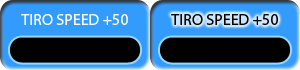
<style>
.page{position:relative;width:300px;height:70px;background:#339bfc}
.page>*{position:absolute;margin:0}
.t1{font:16px "MyriadPro-Regular";color:#ffffff}
.t2{font:16px "MyriadPro-Regular";color:#030303}
</style>
<div class="page">
<p class="t1" style="left:21px;top:14px;width:107px;height:11px">TIRO SPEED +50</p>
<p class="t2" style="left:171px;top:14px;width:107px;height:11px">TIRO SPEED +50</p>
</div>
